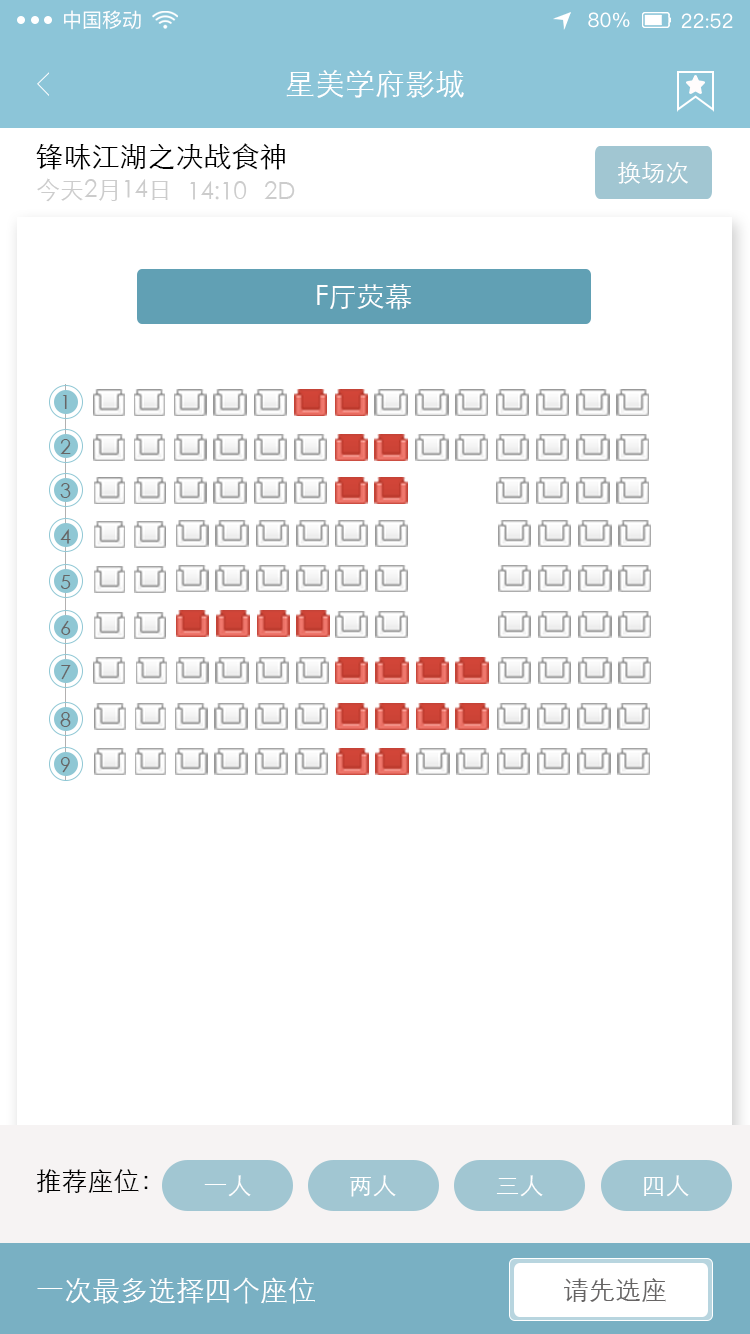
<style>
.page{position:relative;width:750px;height:1334px;background:#ffffff}
.page>*{position:absolute;margin:0}
.t1{font:20px "PingFangSC-Regular";color:#ffffff}
.t2{font:30px "STXihei";color:#ffffff}
.t3{font:28px "STXihei";color:#000000}
.t4{font:24px "STXihei";color:#fefefe}
.t5{font:24px "STXihei";color:#cccccc}
.t6{font:28px "STXihei";color:#ffffff}
.t7{font:19.9px "STXihei";color:#676565}
.t8{font:26px "STXihei";color:#010101}
.t9{font:24px "STXihei";color:#ffffff}
.t10{font:26px "STXihei";color:#676565}
</style>
<div class="page">
<p class="t1" style="left:64px;top:10px;width:77px;height:20px">中国移动</p>
<p class="t1" style="left:588px;top:12px;width:42px;height:16px">80%</p>
<p class="t1" style="left:681px;top:13px;width:52px;height:16px">22:52</p>
<p class="t2" style="left:286px;top:69px;width:178px;height:29px">星美学府影城</p>
<p class="t3" style="left:36px;top:143px;width:249px;height:27px">锋味江湖之决战食神</p>
<p class="t4" style="left:618px;top:162px;width:70px;height:22px">换场次</p>
<p class="t5" style="left:37px;top:178px;width:131px;height:24px">今天2月14日</p>
<p class="t5" style="left:190px;top:181px;width:57px;height:19px">14:10</p>
<p class="t5" style="left:264px;top:181px;width:31px;height:18px">2D</p>
<p class="t6" style="left:317px;top:284px;width:95px;height:26px">F厅荧幕</p>
<p class="t7" style="left:62px;top:395px;width:5px;height:14px">1</p>
<p class="t7" style="left:60px;top:439px;width:11px;height:15px">2</p>
<p class="t7" style="left:60px;top:483px;width:11px;height:15px">3</p>
<p class="t7" style="left:60px;top:529px;width:11px;height:15px">4</p>
<p class="t7" style="left:60px;top:575px;width:11px;height:14px">5</p>
<p class="t7" style="left:61px;top:620px;width:10px;height:15px">6</p>
<p class="t7" style="left:61px;top:665px;width:10px;height:15px">7</p>
<p class="t7" style="left:60px;top:712px;width:11px;height:15px">8</p>
<p class="t7" style="left:60px;top:757px;width:10px;height:16px">9</p>
<p class="t8" style="left:36px;top:1169px;width:112px;height:24px">推荐座位：</p>
<p class="t9" style="left:204px;top:1175px;width:47px;height:22px">一人</p>
<p class="t9" style="left:350px;top:1175px;width:46px;height:22px">两人</p>
<p class="t9" style="left:496px;top:1175px;width:47px;height:22px">三人</p>
<p class="t9" style="left:644px;top:1175px;width:45px;height:22px">四人</p>
<p class="t6" style="left:37px;top:1277px;width:278px;height:27px">一次最多选择四个座位</p>
<p class="t10" style="left:564px;top:1278px;width:102px;height:24px">请先选座</p>
</div>
